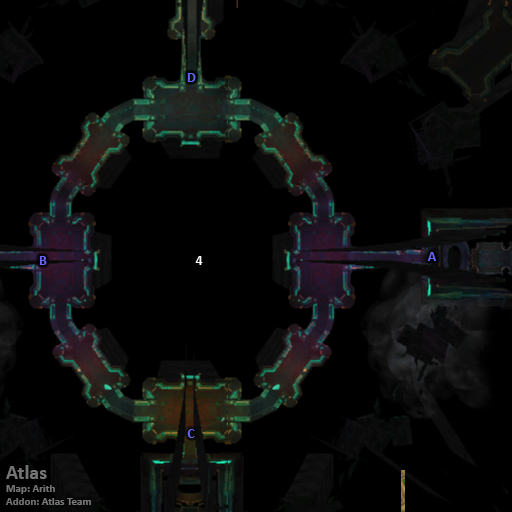
<style>
.page{position:relative;width:512px;height:512px;background:#000000}
.page>*{position:absolute;margin:0}
.t1{font:14px "Calibri-Bold";color:#6666ff}
.t2{font:14px "Calibri-Bold";color:#ffffff}
.t3{font:11px "Calibri-Bold";color:#747474}
.t4{font:20px "Calibri-Bold";color:#747474}
</style>
<div class="page">
<p class="t1" style="left:187px;top:73px;width:9px;height:9px">D</p>
<p class="t1" style="left:39px;top:256px;width:8px;height:9px">B</p>
<p class="t2" style="left:195px;top:256px;width:8px;height:9px">4</p>
<p class="t1" style="left:427px;top:252px;width:9px;height:9px">A</p>
<p class="t1" style="left:187px;top:429px;width:8px;height:9px">C</p>
<p class="t3" style="left:6px;top:465px;width:85px;height:40px"><span class="t4">Atlas<br></span>Map: Arith<br>Addon: Atlas Team</p>
</div>
